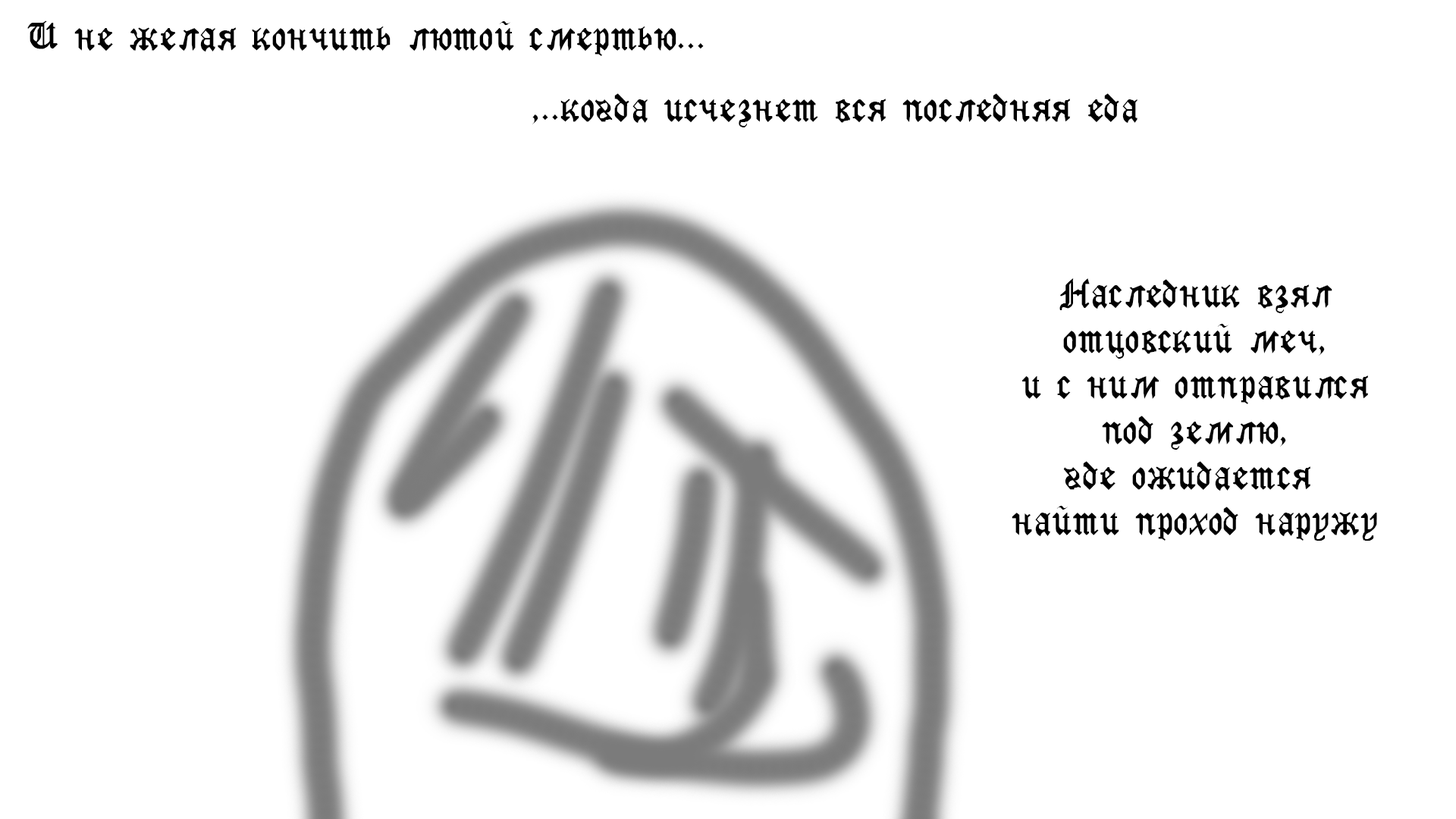
<style>
.page{position:relative;width:1456px;height:819px;background:#ffffff}
.page>*{position:absolute;margin:0}
.t1{font:9.1px "GothicRusMedium";color:#000000}
</style>
<div class="page">
<p class="t1" style="left:27px;top:20px;width:677px;height:36px;text-align:center">И не желая кончить лютой смертью...</p>
<p class="t1" style="left:532px;top:93px;width:606px;height:34px;text-align:center">,..когда исчезнет вся последняя еда</p>
<p class="t1" style="left:1012px;top:278px;width:365px;height:263px;text-align:center">Наследник взял<br>отцовский меч,<br>и с ним отправился<br>под землю,<br>где ожидается <br>найти проход наружу</p>
</div>
